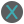
<style>
.page{position:relative;width:24px;height:24px;background:#5b5d5e}
.page>*{position:absolute;margin:0}
.t1{font:18px "ComicSansMS";letter-spacing:0.05em;color:#3eacb3;text-transform:uppercase}
</style>
<div class="page">
<p class="t1" style="left:5px;top:5px;width:13px;height:14px">X</p>
</div>
